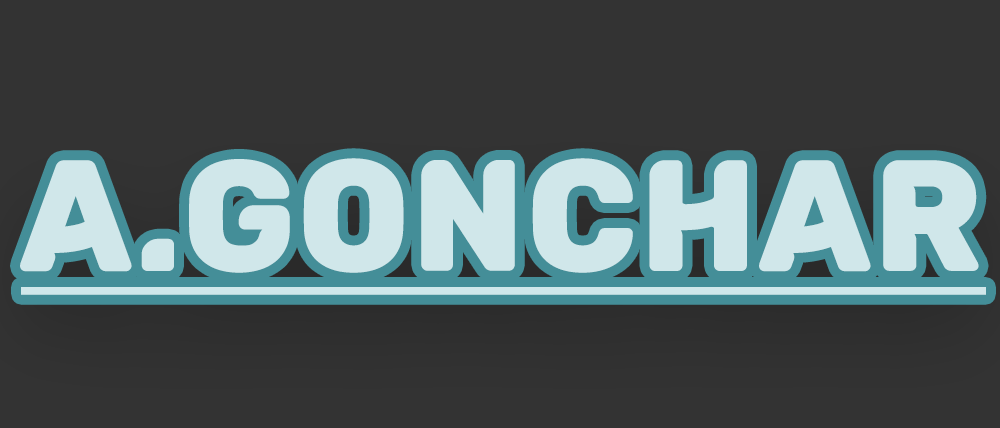
<style>
.page{position:relative;width:1000px;height:428px;background:#333333}
.page>*{position:absolute;margin:0}
.t1{font:152.8px "Cunia";letter-spacing:0.005em;color:#d0e7ea;text-transform:uppercase;font-weight:bold;text-decoration:underline}
</style>
<div class="page">
<p class="t1" style="left:20px;top:158px;width:966px;height:137px">A.Gonchar</p>
</div>
